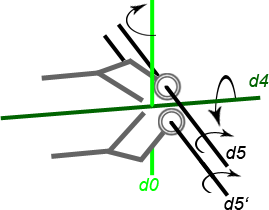
<style>
.page{position:relative;width:269px;height:210px;background:#ffffff}
.page>*{position:absolute;margin:0}
.t1{font:18px "Arial-ItalicMT";color:#006400}
.t2{font:18px "Arial-ItalicMT";color:#000000}
.t3{font:18px "Arial-ItalicMT";color:#00ff00}
</style>
<div class="page">
<p class="t1" style="left:249px;top:74px;width:20px;height:13px">d4</p>
<p class="t2" style="left:226px;top:146px;width:20px;height:13px">d5</p>
<p class="t3" style="left:139px;top:178px;width:20px;height:13px">d0</p>
<p class="t2" style="left:224px;top:197px;width:25px;height:13px">d5‘</p>
</div>
